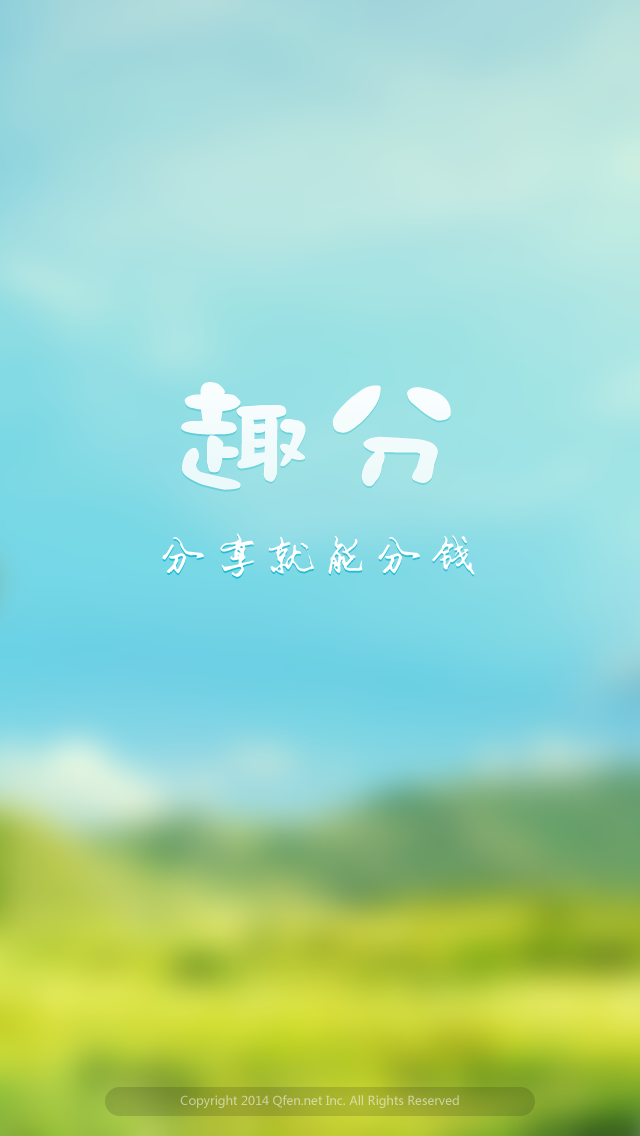
<style>
.page{position:relative;width:640px;height:1136px}
.page>*{position:absolute;margin:0}
.t1{font:150px "DFMo-W9-WINP-BF";color:#ffffff}
.t2{font:54px "ÊéÌå·»°²¾°³¼¸Ö±ÊÐÐÊé";color:#ffffff}
.t3{font:12px "MicrosoftYaHei";color:#d0d69d}
</style>
<div class="page">
<p class="t1" style="left:181px;top:382px;width:270px;height:108px">趣分</p>
<p class="t2" style="left:162px;top:533px;width:313px;height:44px">分享就能分钱</p>
<p class="t3" style="left:180px;top:1095px;width:279px;height:13px">Copyright 2014 Qfen.net Inc. All Rights Reserved</p>
</div>
